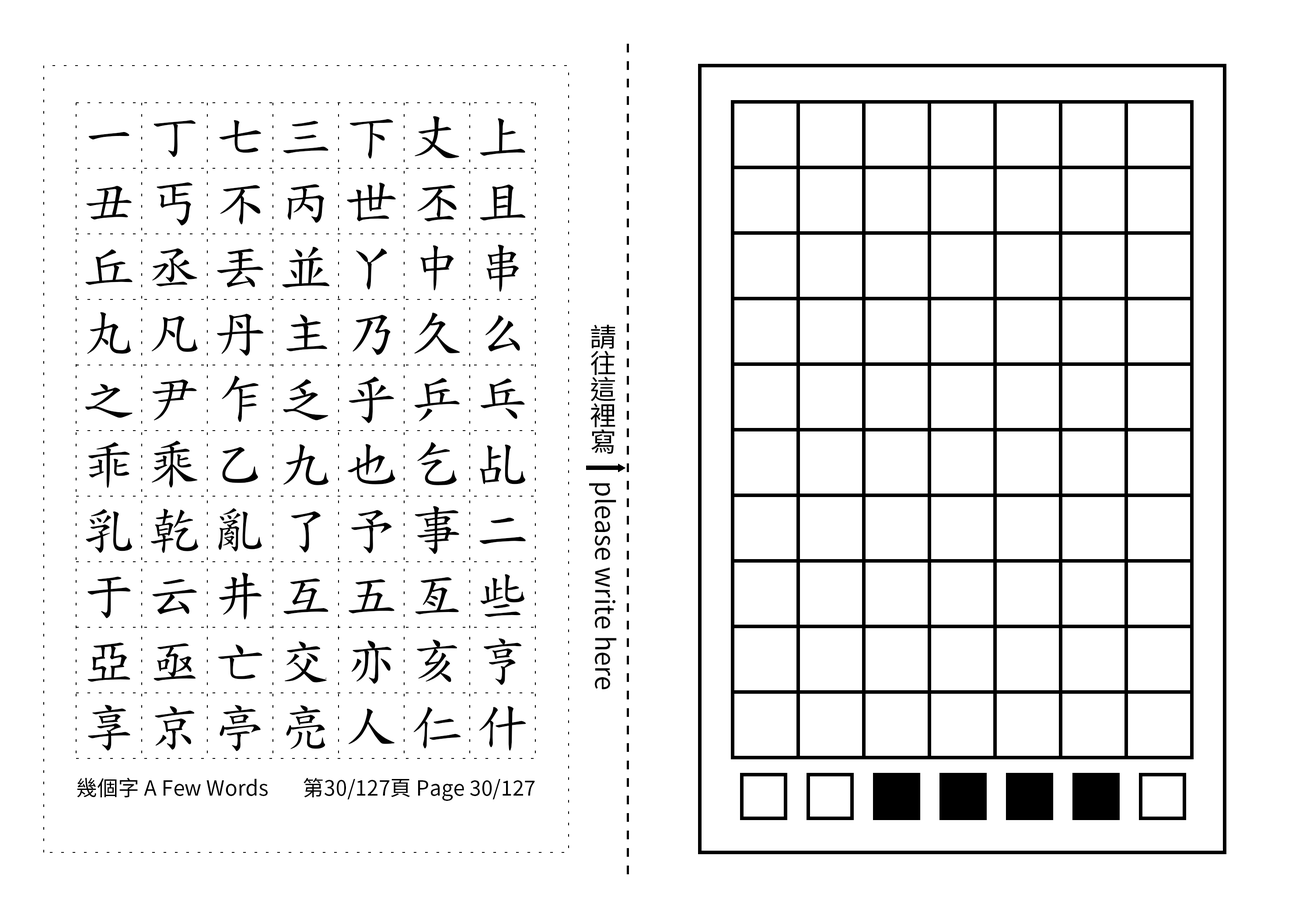
<style>
.page{position:relative;width:1299px;height:918px;background:#ffffff}
.page>*{position:absolute;margin:0}
.t1{font:52.5px/65.6px "TW-Kai-98_1";letter-spacing:0.25em;color:#000000}
.t2{font:26.2px "SourceHanSansTC-Regular";color:#000000}
.t3{font:21px "SourceHanSansTC-Regular";color:#000000}
</style>
<div class="page">
<p class="t1" style="left:85px;top:116px;width:441px;height:636px;text-align:center">一丁七三下丈上丑丐不丙世丕且丘丞丟並丫中串丸凡丹主乃久么之尹乍乏乎乒乓乖乘乙九也乞乩乳乾亂了予事二于云井互五亙些亞亟亡交亦亥亨享京亭亮人仁什</p>
<p class="t2" style="left:589px;top:324px;width:28px;height:366px;text-align:center">請往這裡寫　please write here</p>
<p class="t3" style="left:77px;top:778px;width:191px;height:20px">幾個字 A Few Words</p>
<p class="t3" style="left:303px;top:778px;width:232px;height:23px">第30/127頁 Page 30/127</p>
</div>
